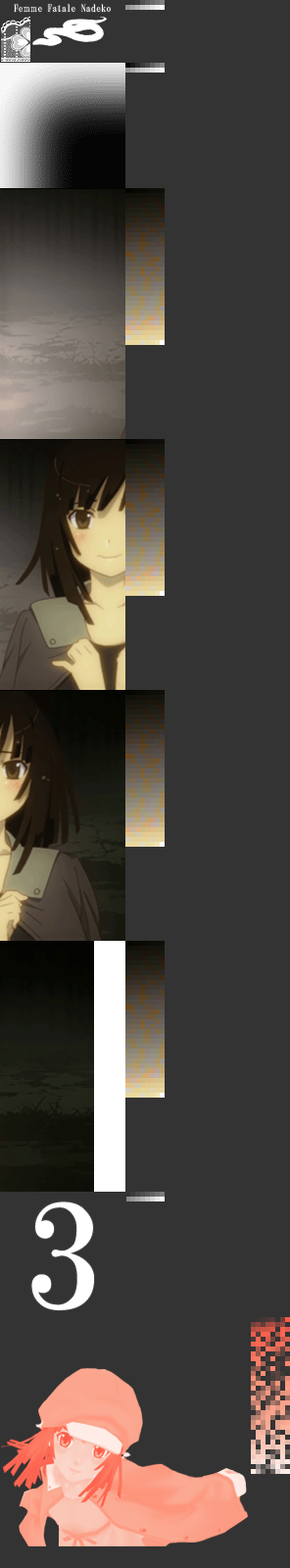
<style>
.page{position:relative;width:290px;height:1568px;background:#333333}
.page>*{position:absolute;margin:0}
.t1{font:9.8px "HGMinchoB";letter-spacing:0.01em;color:#ffffff}
.t2{font:9.8px "HGMinchoB";letter-spacing:0.075em;color:#ffffff;scale:0.7 1}
.t3{font:147px "HGMinchoB";letter-spacing:0.01em;color:#ffffff}
</style>
<div class="page">
<p class="t1" style="left:14px;top:4px;width:97px;height:9px">Fe<span class="t2">ｍｍ</span>e Fatale Nadeko</p>
<p class="t3" style="left:31px;top:1201px;width:63px;height:109px">3</p>
</div>
